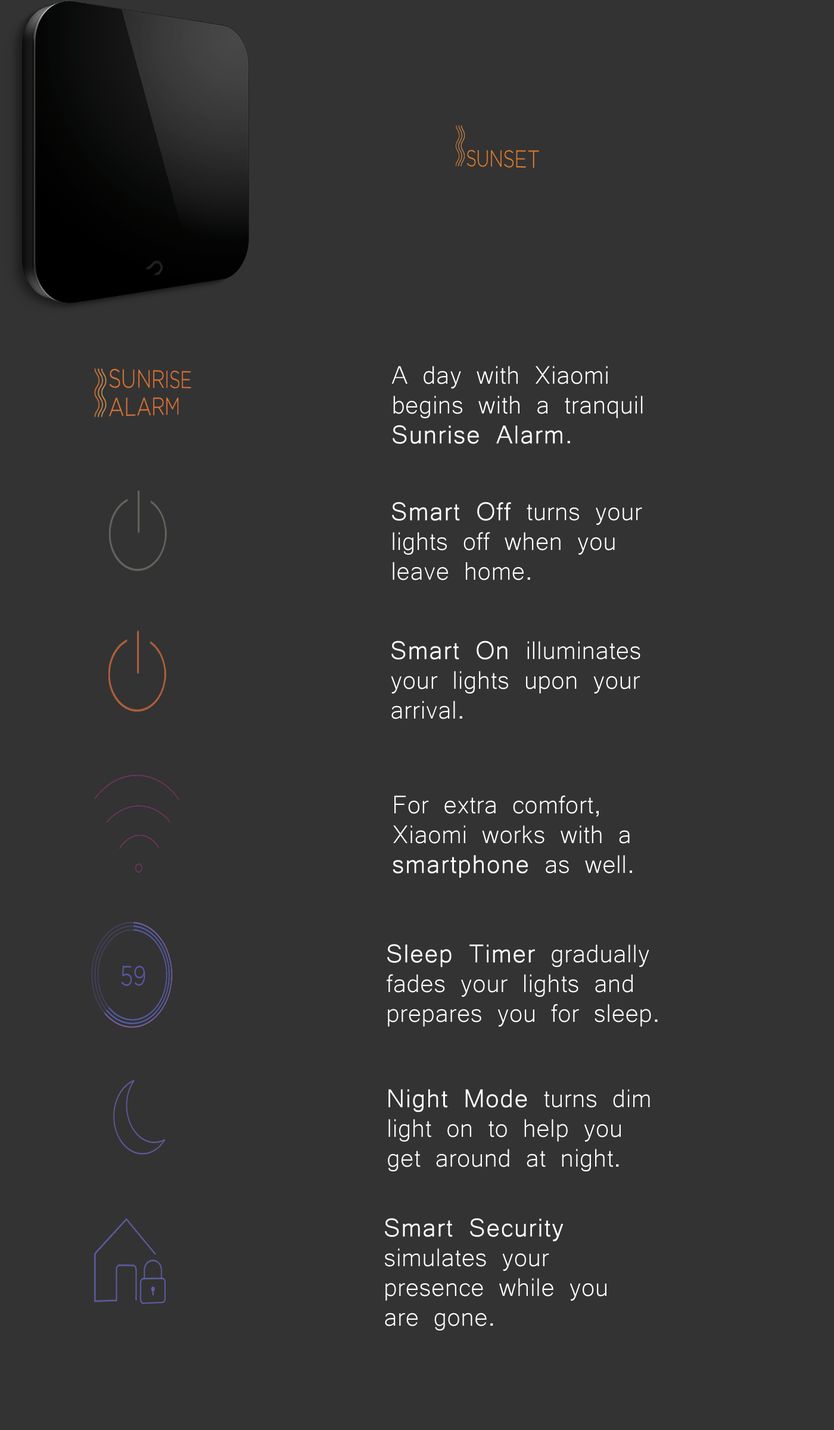
<style>
.page{position:relative;width:834px;height:1430px;background:#333333}
.page>*{position:absolute;margin:0}
.t1{font:32.8px/29.8px "Microsoft-Yi-Baiti";color:#ffffff}
.t2{font:32.8px/29.8px "Microsoft-Yi-Baiti";color:#ffffff;font-weight:bold}
</style>
<div class="page">
<p class="t1" style="left:391px;top:366px;width:252px;height:78px;text-align:justify">A day with Xiaomi<br>begins with a tranquil <br><span class="t2">Sunrise Alarm</span>.</p>
<p class="t1" style="left:392px;top:502px;width:250px;height:78px;text-align:justify"><span class="t2">Smart Off</span> turns your <br>lights off when you <br>leave home.</p>
<p class="t1" style="left:391px;top:640px;width:249px;height:79px;text-align:justify"><span class="t2">Smart On </span>illuminates <br>your lights upon your <br>arrival.</p>
<p class="t1" style="left:393px;top:795px;width:239px;height:83px;text-align:justify">For extra comfort, <br>Xiaomi works with a <br><span class="t2">smartphone</span> as well.</p>
<p class="t1" style="left:387px;top:944px;width:271px;height:82px;text-align:justify"><span class="t2">Sleep Timer</span> gradually <br>fades your lights and <br>prepares you for sleep.</p>
<p class="t1" style="left:388px;top:1089px;width:262px;height:82px;text-align:justify"><span class="t2">Night Mode</span> turns dim <br>light on to help you <br>get around at night.</p>
<p class="t1" style="left:385px;top:1218px;width:221px;height:112px;text-align:justify"><span class="t2">Smart Security</span> <br>simulates your <br>presence while you <br>are gone.</p>
</div>
